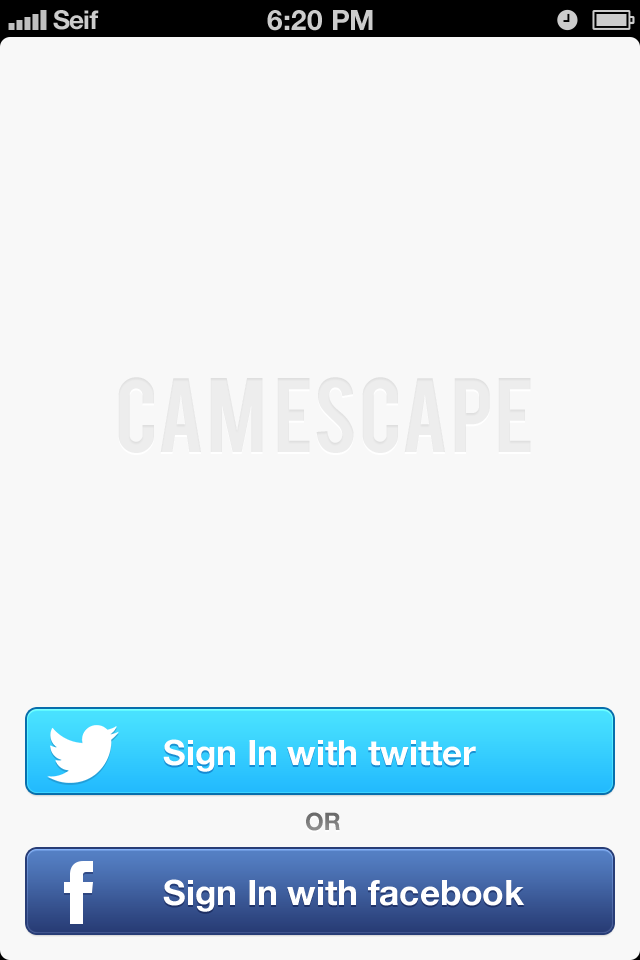
<style>
.page{position:relative;width:640px;height:960px;background:#f8f8f8}
.page>*{position:absolute;margin:0}
.t1{font:26px "HelveticaNeue-Bold";color:#cccccc}
.t2{font:28px "HelveticaNeue-Bold";color:#cccccc;text-transform:uppercase}
.t3{font:83px "Bebas";color:#ffffff}
.t4{font:35px "HelveticaNeue-Bold";color:#ffffff}
.t5{font:24px "HelveticaNeue-Bold";color:#7b7b7b}
</style>
<div class="page">
<p class="t1" style="left:53px;top:10px;width:46px;height:20px">Seif</p>
<p class="t2" style="left:267px;top:10px;width:106px;height:21px">6:20 pM</p>
<p class="t3" style="left:118px;top:377px;width:413px;height:76px">Cam Escape</p>
<p class="t4" style="left:163px;top:739px;width:313px;height:33px">Sign In with twitter</p>
<p class="t5" style="left:306px;top:812px;width:34px;height:19px">OR</p>
<p class="t4" style="left:163px;top:879px;width:362px;height:33px">Sign In with facebook</p>
</div>
